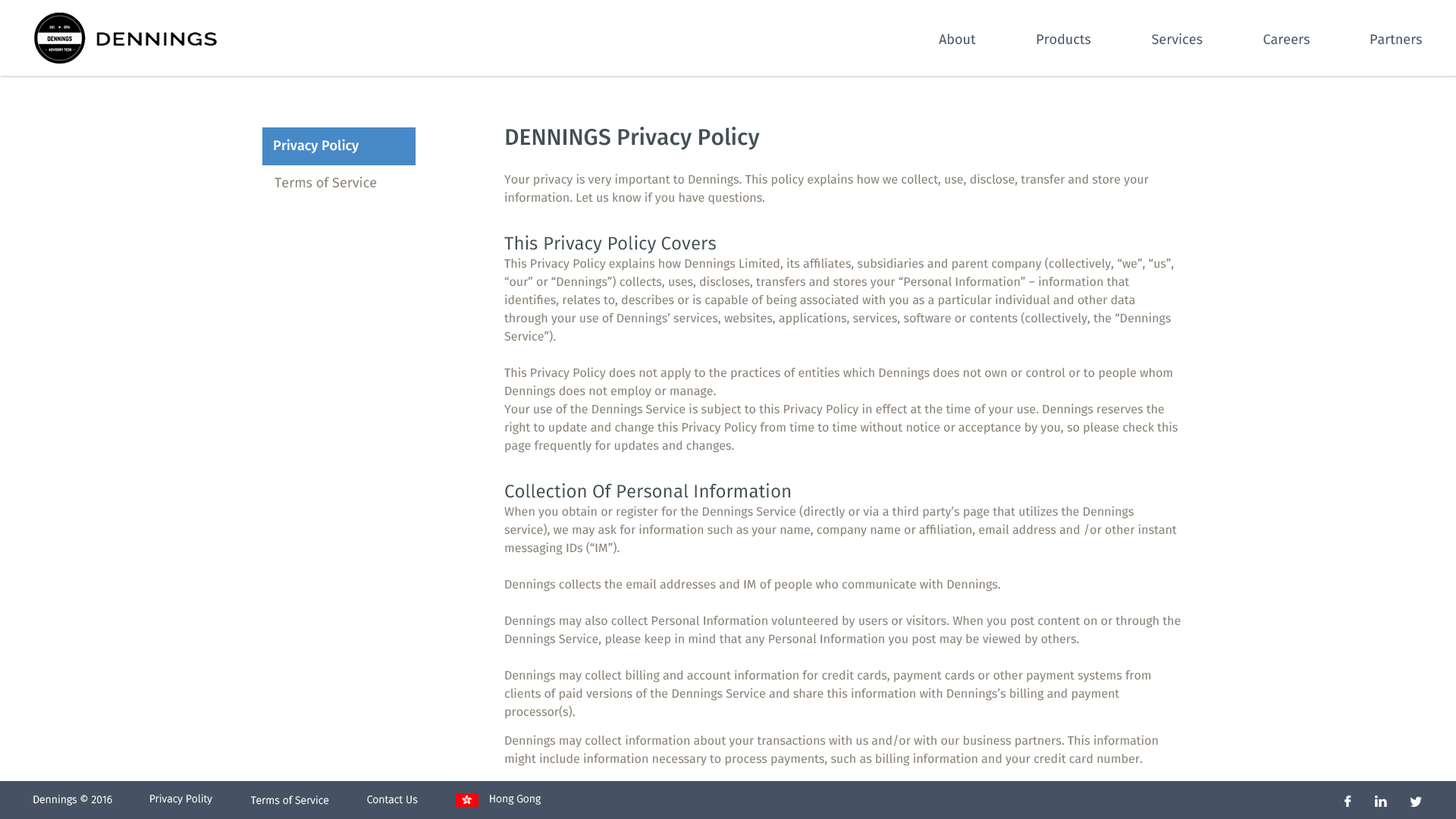
<style>
.page{position:relative;width:1456px;height:819px;background:#ffffff}
.page>*{position:absolute;margin:0}
.t1{font:13.6px "FiraSans-Regular";color:#465163}
.t2{font:13.6px/20.5px "FiraSans-Regular";color:#1a1a1a}
.t3{font:22.7px/34.1px "FiraSans-Medium";color:#445054}
.t4{font:12.1px/18.2px "FiraSans-Regular";color:#898176}
.t5{font:18.2px/27.3px "FiraSans-Regular";color:#445054}
.t6{font:13.6px "FiraSans-Medium";color:#fffefe}
.t7{font:13.6px "FiraSans-Regular";color:#898176}
.t8{font:10.6px "FiraSans-Light";color:#ffffff}
</style>
<div class="page">
<p class="t1" style="left:939px;top:33px;width:37px;height:12px">About</p>
<p class="t1" style="left:1037px;top:33px;width:54px;height:12px">Products</p>
<p class="t1" style="left:1152px;top:33px;width:51px;height:12px">Services</p>
<p class="t1" style="left:1263px;top:34px;width:47px;height:11px">Careers</p>
<p class="t1" style="left:1370px;top:34px;width:52px;height:11px">Partners</p>
<p class="t2" style="left:504px;top:127px;width:677px;height:639px"><span class="t3">DENNINGS Privacy Policy<br><br></span><span class="t4">Your privacy is very important to Dennings. This policy explains how we collect, use, disclose, transfer and store your information. Let us know if you have questions.<br><br></span><span class="t5">This Privacy Policy Covers<br></span><span class="t4">This Privacy Policy explains how Dennings Limited, its affiliates, subsidiaries and parent company (collectively, “we”, “us”, “our” or “Dennings”) collects, uses, discloses, transfers and stores your “Personal Information” – information that identifies, relates to, describes or is capable of being associated with you as a particular individual and other data through your use of Dennings’ services, websites, applications, services, software or contents (collectively, the “Dennings Service”).<br><br>This Privacy Policy does not apply to the practices of entities which Dennings does not own or control or to people whom Dennings does not employ or manage.<br>Your use of the Dennings Service is subject to this Privacy Policy in effect at the time of your use. Dennings reserves the right to update and change this Privacy Policy from time to time without notice or acceptance by you, so please check this page frequently for updates and changes.<br><br></span><span class="t5">Collection Of Personal Information<br></span><span class="t4">When you obtain or register for the Dennings Service (directly or via a third party’s page that utilizes the Dennings service), we may ask for information such as your name, company name or affiliation, email address and /or other instant messaging IDs (“IM”).<br><br>Dennings collects the email addresses and IM of people who communicate with Dennings.<br><br>Dennings may also collect Personal Information volunteered by users or visitors. When you post content on or through the Dennings Service, please keep in mind that any Personal Information you post may be viewed by others.<br><br>Dennings may collect billing and account information for credit cards, payment cards or other payment systems from clients of paid versions of the Dennings Service and share this information with Dennings’s billing and payment processor(s).<br><br>Dennings may collect information about your transactions with us and/or with our business partners. This information might include information necessary to process payments, such as billing information and your credit card number.<br></span><br>Dennings may receive information about you or your transactions from our business partners with which you have an account, service relationship or transaction history.<br><br>Dennings may obtain information about you from service providers engaged in the business of marketing data.<br>Dennings may receive Personal Information from third parties when you authorize such third parties such as pages that have been built using the Dennings Service, to authenticate or identify you to Dennings or sign in to the Dennings Service using credentials from a third party service.<br><br>Dennings collects anonymous demographic information, which is not unique to you, such as your postal code, current location, time zone, age, gender, preferences, interests and favourites.<br><br>There is also information about your computer hardware(s) and software(s) and mobile device(s) that is automatically collected by us. This information may include your IP address, browser type, domain name, access time and referring website addresses. This information is used by Dennings for the operation and quality maintenance of Dennings Service. This information is also used for the provision of the general statistics regarding the use of Dennings Service by our customers.</p>
<p class="t6" style="left:274px;top:139px;width:85px;height:14px">Privacy Policy</p>
<p class="t7" style="left:275px;top:177px;width:102px;height:11px">Terms of Service</p>
<p class="t8" style="left:33px;top:795px;width:79px;height:10px">Dennings © 2016</p>
<p class="t8" style="left:150px;top:794px;width:62px;height:11px">Privacy Polity</p>
<p class="t8" style="left:250px;top:795px;width:79px;height:10px">Terms of Service</p>
<p class="t8" style="left:367px;top:795px;width:51px;height:9px">Contact Us</p>
<p class="t8" style="left:490px;top:795px;width:51px;height:10px">Hong Gong</p>
</div>
